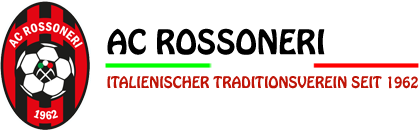
<style>
.page{position:relative;width:420px;height:130px;background:#ffffff}
.page>*{position:absolute;margin:0}
.t1{font:30px "HoboStd";color:#000000;text-transform:uppercase}
.t2{font:14px "HoboStd";color:#bf1508;text-transform:uppercase}
</style>
<div class="page">
<p class="t1" style="left:107px;top:28px;width:218px;height:27px">AC Rossoneri</p>
<p class="t2" style="left:107px;top:76px;width:311px;height:13px">Italienischer Traditionsverein seit 1962</p>
</div>
